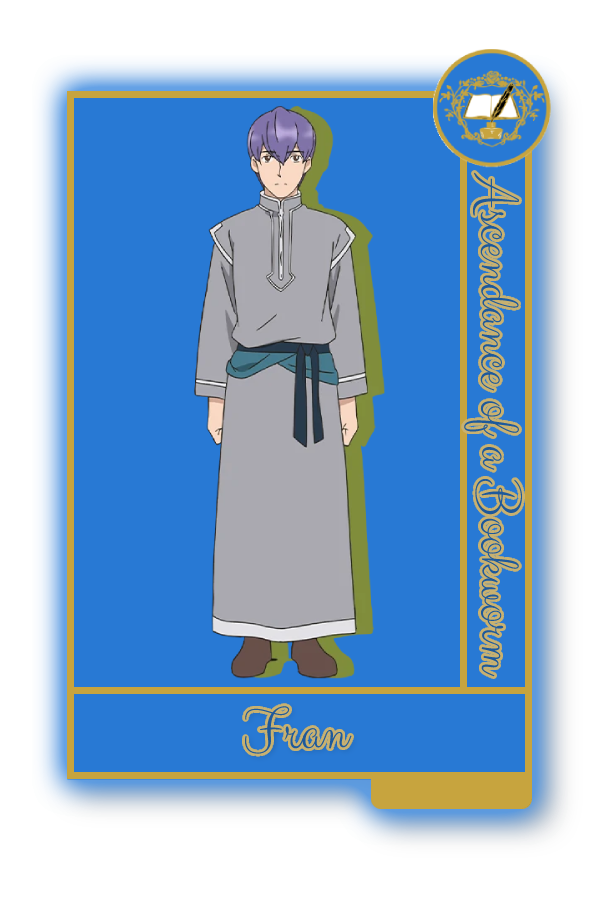
<style>
.page{position:relative;width:600px;height:900px;background:#2879d4}
.page>*{position:absolute;margin:0}
.t1{font:58px "ClickerScript-Regular";color:#1d599c}
.t2{font:60px "ClickerScript-Regular";color:#1d599c}
</style>
<div class="page">
<p class="t1" style="left:464px;top:172px;width:59px;height:505px;rotate:90deg">Ascendance of a Bookworm</p>
<p class="t2" style="left:244px;top:706px;width:108px;height:48px">Fran</p>
</div>
